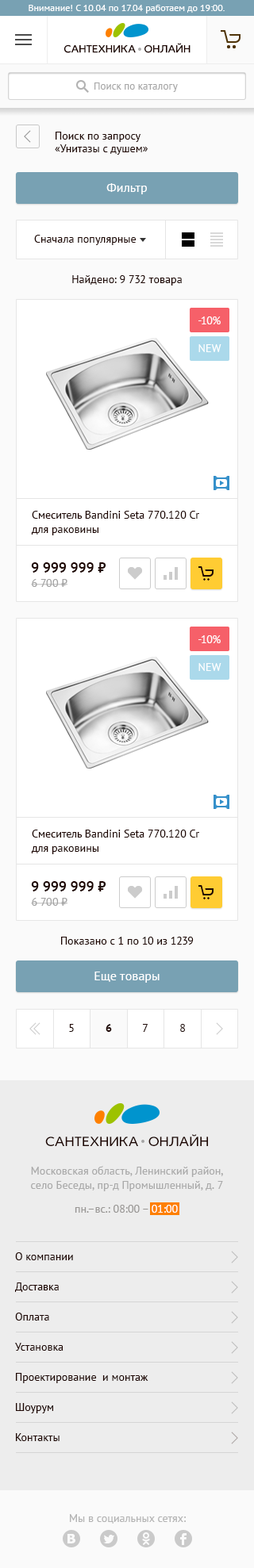
<style>
.page{position:relative;width:254px;height:1568px;background:#ffffff}
.page>*{position:absolute;margin:0}
.t1{font:9.5px "PTSans-Regular";color:#ffffff}
.t2{font:11.1px "IdealistSans";color:#1e0602;text-transform:uppercase}
.t3{font:10.3px "PTSans-Regular";color:#a6a6a6}
.t4{font:11.1px/12.7px "PTSans-Regular";color:#1e0602}
.t5{font:12.7px "PTSans-Regular";color:#ffffff}
.t6{font:11.1px "PTSans-Regular";color:#1e0602}
.t7{font:11.1px "PTSans-Regular";color:#ffffff}
.t8{font:11.1px/14.3px "PTSans-Regular";color:#1e0602}
.t9{font:14.3px "PTSans-Bold";color:#1e0602}
.t10{font:11.1px "PTSans-Regular";color:#a3a3a3}
.t11{font:11.1px "PTSans-Bold";color:#1e0602}
.t12{font:14.3px "IdealistSans";color:#1e0602;text-transform:uppercase}
.t13{font:11.1px/14.3px "PTSans-Regular";color:#aaaaaa}
.t14{font:11.1px "PTSans-Regular";color:#999795}
.t15{font:11.1px "PTSans-Regular";color:#b4b4b4}
</style>
<div class="page">
<p class="t1" style="left:29px;top:5px;width:195px;height:8px">Внимание! С 10.04 по 17.04 работаем до 19:00.</p>
<p class="t2" style="left:63px;top:43px;width:127px;height:10px">сантехника  онлайн</p>
<p class="t3" style="left:94px;top:82px;width:84px;height:10px">Поиск по каталогу</p>
<p class="t4" style="left:55px;top:132px;width:93px;height:23px">Поиск по запросу<br>«Унитазы с душем»</p>
<p class="t5" style="left:106px;top:183px;width:41px;height:11px">Фильтр</p>
<p class="t6" style="left:34px;top:235px;width:102px;height:10px">Сначала популярные</p>
<p class="t6" style="left:72px;top:275px;width:110px;height:11px">Найдено: 9 732 товара</p>
<p class="t7" style="left:198px;top:316px;width:22px;height:8px">-10%</p>
<p class="t7" style="left:198px;top:344px;width:23px;height:8px">NEW</p>
<p class="t8" style="left:31px;top:511px;width:168px;height:24px">Смеситель Bandini Seta 770.120 Cr<br>для раковины</p>
<p class="t9" style="left:31px;top:562px;width:75px;height:11px">9 999 999 ₽</p>
<p class="t10" style="left:31px;top:579px;width:36px;height:8px">6 700 ₽</p>
<p class="t7" style="left:198px;top:635px;width:22px;height:8px">-10%</p>
<p class="t7" style="left:198px;top:663px;width:23px;height:8px">NEW</p>
<p class="t8" style="left:31px;top:830px;width:168px;height:24px">Смеситель Bandini Seta 770.120 Cr<br>для раковины</p>
<p class="t9" style="left:31px;top:881px;width:75px;height:10px">9 999 999 ₽</p>
<p class="t10" style="left:31px;top:898px;width:36px;height:8px">6 700 ₽</p>
<p class="t6" style="left:61px;top:937px;width:133px;height:8px">Показано с 1 по 10 из 1239</p>
<p class="t5" style="left:94px;top:972px;width:65px;height:11px">Еще товары</p>
<p class="t6" style="left:69px;top:1024px;width:5px;height:8px">5</p>
<p class="t11" style="left:105px;top:1024px;width:7px;height:8px">6</p>
<p class="t6" style="left:143px;top:1024px;width:5px;height:8px">7</p>
<p class="t6" style="left:180px;top:1024px;width:5px;height:8px">8</p>
<p class="t12" style="left:45px;top:1134px;width:163px;height:12px">сантехника  онлайн</p>
<p class="t13" style="left:31px;top:1166px;width:192px;height:25px;text-align:center">Московская область, Ленинский район,<br>село Беседы, пр-д Промышленный, д. 7</p>
<p class="t14" style="left:75px;top:1205px;width:103px;height:8px">пн.–вc.: 08:00 – <span class="t7">01:00</span></p>
<p class="t8" style="left:15px;top:1252px;width:133px;height:189px">О компании<br>Доставка<br>Оплата<br>Установка<br>Проектирование  и монтаж<br>Шоурум<br>Контакты</p>
<p class="t15" style="left:70px;top:1514px;width:116px;height:10px">Мы в социальных сетях:</p>
</div>
